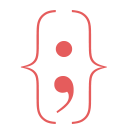
<style>
.page{position:relative;width:128px;height:128px;background:#ffffff}
.page>*{position:absolute;margin:0}
.t1{font:115px "Didot-Bold";color:#e55c5c}
</style>
<div class="page">
<p class="t1" style="left:20px;top:10px;width:87px;height:114px">{;}</p>
</div>
